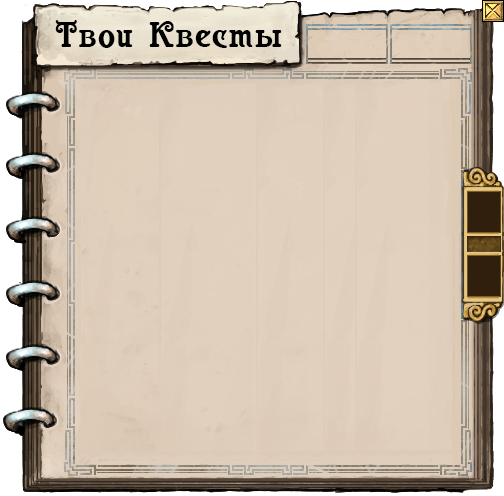
<style>
.page{position:relative;width:504px;height:496px}
.page>*{position:absolute;margin:0}
.t1{font:35.8px "Casanova";letter-spacing:0.04em;color:#000000}
</style>
<div class="page">
<p class="t1" style="left:55px;top:20px;width:227px;height:28px">Твои Квесты</p>
</div>
